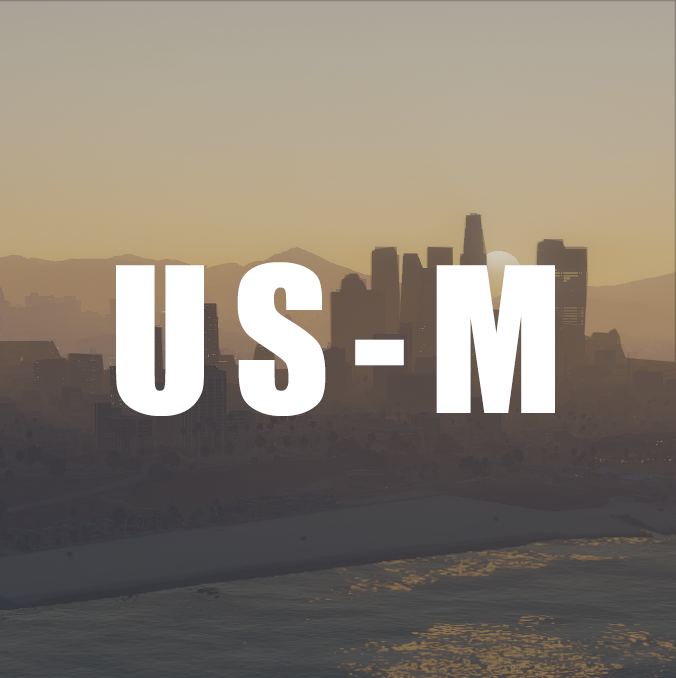
<style>
.page{position:relative;width:676px;height:678px}
.page>*{position:absolute;margin:0}
.t1{font:186.7px "Impact";letter-spacing:0.12em;color:#ffffff}
</style>
<div class="page">
<p class="t1" style="left:116px;top:262px;width:439px;height:154px">US-M</p>
</div>
